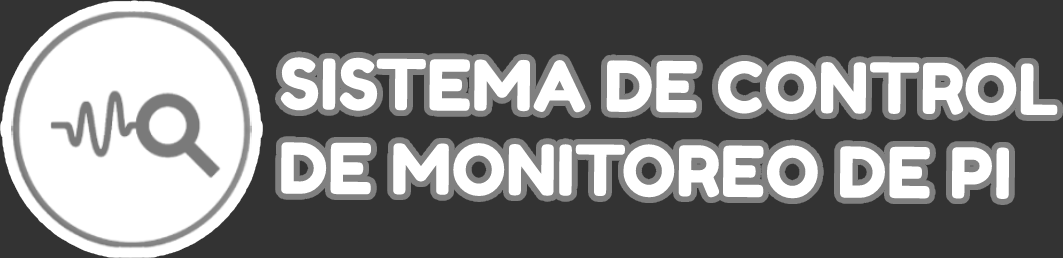
<style>
.page{position:relative;width:1063px;height:258px;background:#333333}
.page>*{position:absolute;margin:0}
.t1{font:70.2px "FredokaOne-Regular";color:#ffffff}
</style>
<div class="page">
<p class="t1" style="left:280px;top:57px;width:778px;height:142px">SISTEMA DE CONTROL <br>DE MONITOREO DE PI</p>
</div>
